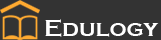
<style>
.page{position:relative;width:161px;height:40px;background:#333333}
.page>*{position:absolute;margin:0}
.t1{font:24px "CopperplateGothic-Bold";color:#ffffff}
</style>
<div class="page">
<p class="t1" style="left:45px;top:19px;width:114px;height:18px">Edulogy</p>
</div>
